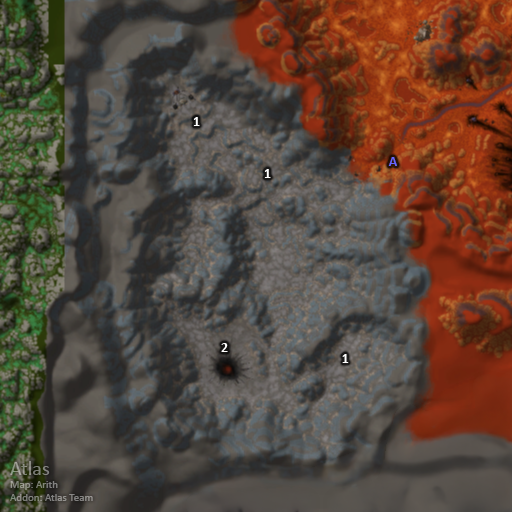
<style>
.page{position:relative;width:512px;height:512px}
.page>*{position:absolute;margin:0}
.t1{font:14px "Calibri-Bold";color:#ffffff}
.t2{font:14px "Calibri-Bold";color:#6666ff}
.t3{font:11px "Calibri";color:#838780}
.t4{font:20px "Calibri";color:#838780}
</style>
<div class="page">
<p class="t1" style="left:193px;top:117px;width:7px;height:9px">1</p>
<p class="t2" style="left:388px;top:157px;width:9px;height:9px">A</p>
<p class="t1" style="left:264px;top:169px;width:7px;height:9px">1</p>
<p class="t1" style="left:221px;top:343px;width:7px;height:9px">2</p>
<p class="t1" style="left:342px;top:354px;width:7px;height:9px">1</p>
<p class="t3" style="left:10px;top:461px;width:83px;height:40px"><span class="t4">Atlas<br></span>Map: Arith<br>Addon: Atlas Team</p>
</div>
